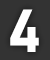
<style>
.page{position:relative;width:50px;height:60px;background:#333333}
.page>*{position:absolute;margin:0}
.t1{font:60px "Bahnschrift-Bold";color:#ffffff}
</style>
<div class="page">
<p class="t1" style="left:10px;top:9px;width:29px;height:43px">4</p>
</div>
